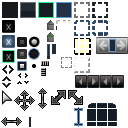
<style>
.page{position:relative;width:128px;height:128px;background:#ffffff}
.page>*{position:absolute;margin:0}
.t1{font:8px "Tahoma";letter-spacing:0.04em;color:#b2b2b2}
.t2{font:8px "Tahoma";letter-spacing:0.04em;color:#ffffff}
</style>
<div class="page">
<p class="t1" style="left:6px;top:24px;width:5px;height:6px">X</p>
<p class="t2" style="left:6px;top:39px;width:5px;height:6px">X</p>
<p class="t1" style="left:6px;top:54px;width:5px;height:6px">X</p>
</div>
